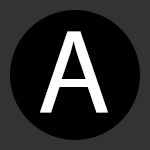
<style>
.page{position:relative;width:150px;height:150px;background:#000000}
.page>*{position:absolute;margin:0}
.t1{font:120px "MyriadPro-Regular";color:#ffffff}
</style>
<div class="page">
<p class="t1" style="left:40px;top:31px;width:68px;height:82px">A</p>
</div>
